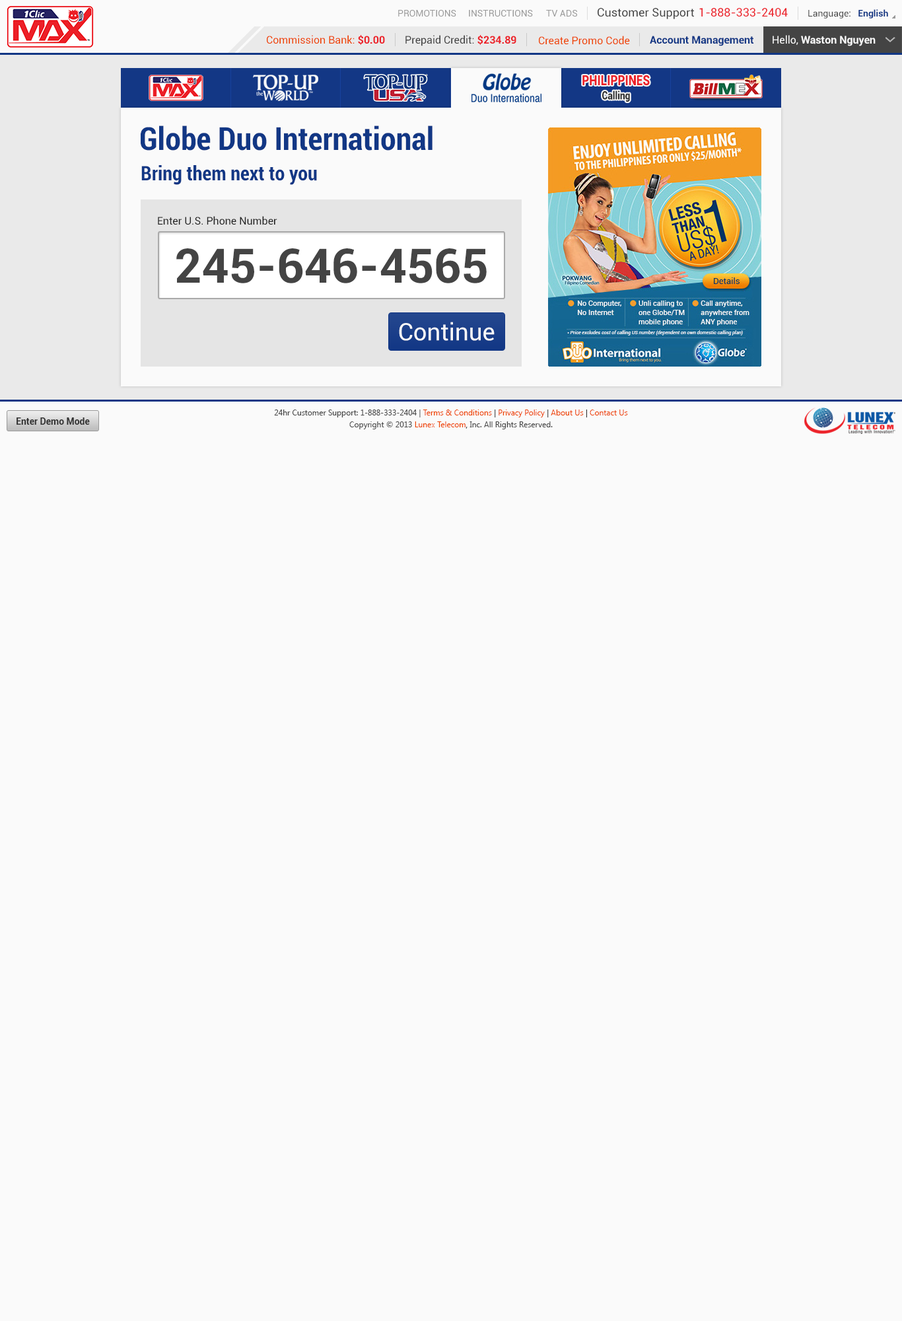
<style>
.page{position:relative;width:902px;height:1321px;background:#fafafa}
.page>*{position:absolute;margin:0}
.t1{font:9.2px "Roboto-Regular";color:#999999}
.t2{font:11.6px "Roboto-Regular";color:#444444}
.t3{font:11.6px "Roboto-Regular";color:#ec2029}
.t4{font:9.2px "Roboto-Regular";color:#444444}
.t5{font:9.2px "Roboto-Bold";color:#123785}
.t6{font:10.6px "Roboto-Regular";color:#ee4400}
.t7{font:10.6px "Roboto-Bold";color:#ec2028}
.t8{font:10.6px "Roboto-Regular";color:#444444}
.t9{font:10.6px "Roboto-Bold";color:#123785}
.t10{font:10.6px "Roboto-Bold";color:#fafafa}
.t11{font:10.6px "Roboto-Regular";color:#fafafa}
.t12{font:14.1px "Roboto-Black";color:#ec2028;scale:0.81 1}
.t13{font:11.3px "Roboto-Black";color:#333333;scale:0.81 1}
.t14{font:31.7px "Roboto-BoldCondensed";color:#123785}
.t15{font:19.8px "Roboto-BoldCondensed";color:#123785}
.t16{font:10.6px "Roboto-Regular";color:#222222}
.t17{font:47.6px "Roboto-Bold";color:#444444}
.t18{font:23.9px "Roboto-Regular";color:#fafafa}
.t19{font:7.9px/11.9px "SegoeUI";color:#444444}
.t20{font:7.9px/11.9px "SegoeUI";color:#ee4400}
.t21{font:7.9px/11.9px "SegoeUI";color:#333333}
.t22{font:9.2px "Roboto-Bold";color:#333333}
</style>
<div class="page">
<p class="t1" style="left:398px;top:10px;width:59px;height:7px">PROMOTIONS</p>
<p class="t1" style="left:469px;top:10px;width:64px;height:7px">INSTRUCTIONS</p>
<p class="t1" style="left:546px;top:10px;width:31px;height:7px">TV ADS</p>
<p class="t2" style="left:598px;top:8px;width:96px;height:11px">Customer Support</p>
<p class="t3" style="left:700px;top:8px;width:88px;height:9px">1-888-333-2404</p>
<p class="t4" style="left:809px;top:9px;width:80px;height:9px">Language:   <span class="t5">English</span></p>
<p class="t6" style="left:267px;top:35px;width:118px;height:10px">Commission Bank: <span class="t7">$0.00</span></p>
<p class="t8" style="left:406px;top:35px;width:111px;height:11px">Prepaid Credit: <span class="t7">$234.89</span></p>
<p class="t6" style="left:539px;top:36px;width:91px;height:9px">Create Promo Code</p>
<p class="t9" style="left:650px;top:36px;width:104px;height:10px">Account Management</p>
<p class="t10" style="left:773px;top:35px;width:103px;height:11px"><span class="t11">Hello, </span>Waston Nguyen</p>
<p class="t12" style="left:583px;top:75px;width:67px;height:11px">PHILIPPINES</p>
<p class="t13" style="left:603px;top:91px;width:27px;height:11px">Calling</p>
<p class="t14" style="left:141px;top:126px;width:292px;height:25px">Globe Duo International</p>
<p class="t15" style="left:141px;top:165px;width:176px;height:20px">Bring them next to you</p>
<p class="t16" style="left:158px;top:216px;width:119px;height:9px">Enter U.S. Phone Number</p>
<p class="t17" style="left:176px;top:248px;width:311px;height:35px">245-646-4565</p>
<p class="t18" style="left:399px;top:322px;width:96px;height:19px">Continue</p>
<p class="t19" style="left:274px;top:410px;width:354px;height:19px;text-align:center">24hr Customer Support: 1-888-333-2404 | <span class="t20">Terms &amp; Conditions</span><span class="t21"> | </span><span class="t20">Privacy Policy</span><span class="t21"> | </span><span class="t20">About Us</span><span class="t21"> | </span><span class="t20">Contact Us<br></span>Copyright © 2013 <span class="t20">Lunex Telecom</span><span class="t21">,</span> Inc. All Rights Reserved.</p>
<p class="t22" style="left:17px;top:418px;width:73px;height:7px">Enter Demo Mode</p>
</div>
